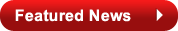
<style>
.page{position:relative;width:178px;height:31px;background:#980e0e}
.page>*{position:absolute;margin:0}
.t1{font:16px "Arial-BoldMT";letter-spacing:0.014em;color:#ffffff}
</style>
<div class="page">
<p class="t1" style="left:15px;top:9px;width:116px;height:13px">Featured News</p>
</div>
